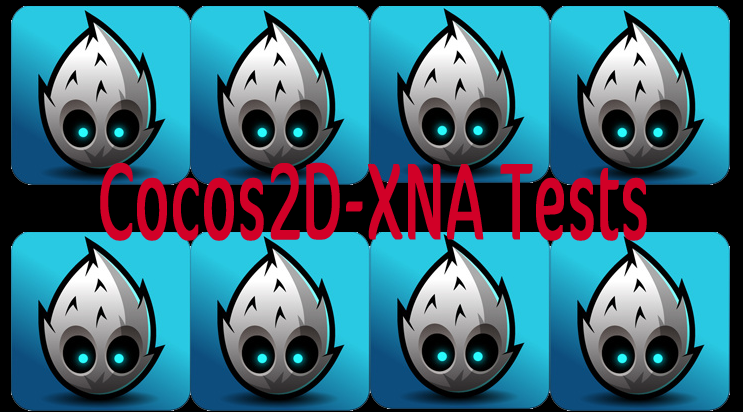
<style>
.page{position:relative;width:743px;height:412px}
.page>*{position:absolute;margin:0}
.t1{font:108px "CoconOT-LightCond";color:#d10027;font-weight:bold;scale:0.67 1}
</style>
<div class="page">
<p class="t1" style="left:100px;top:162px;width:547px;height:79px">Cocos2D-XNA Tests</p>
</div>
